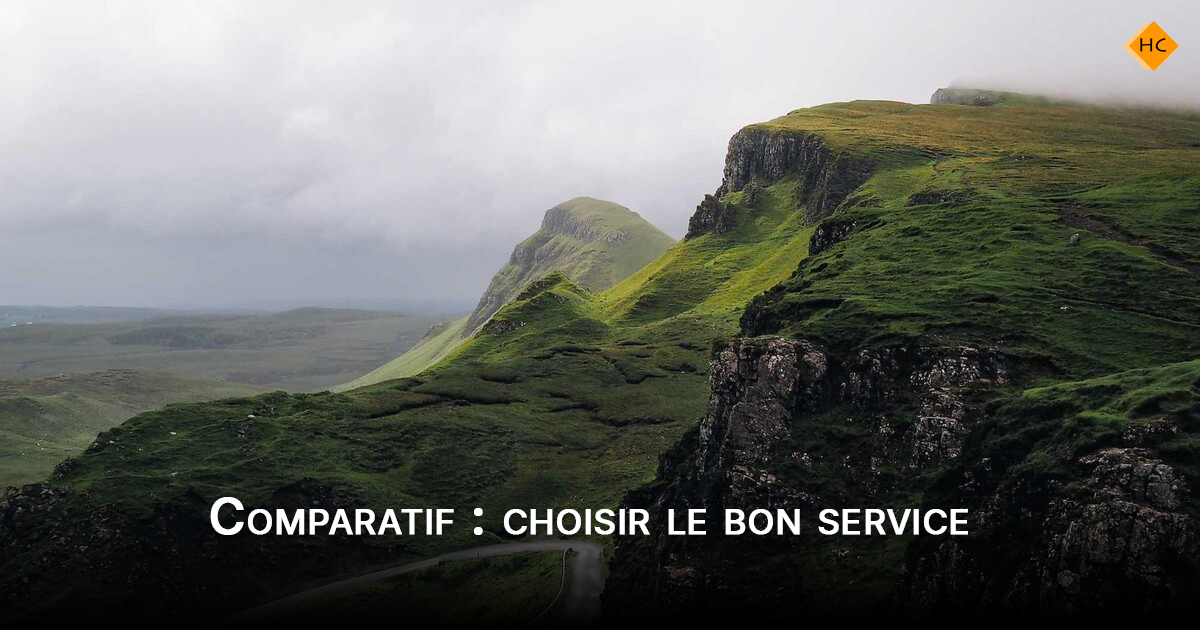
<style>
.page{position:relative;width:1200px;height:630px}
.page>*{position:absolute;margin:0}
.t1{font:50px "Inter-Medium";color:#ffffff;font-variant:small-caps;font-weight:bold}
</style>
<div class="page">
<p class="t1" style="left:210px;top:497px;width:758px;height:38px">Comparatif : choisir le bon service</p>
</div>
